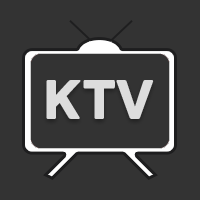
<style>
.page{position:relative;width:200px;height:200px;background:#333333}
.page>*{position:absolute;margin:0}
.t1{font:60px "Archive";color:#dddddd}
</style>
<div class="page">
<p class="t1" style="left:46px;top:80px;width:108px;height:39px">KTV</p>
</div>
